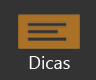
<style>
.page{position:relative;width:96px;height:80px;background:#333333}
.page>*{position:absolute;margin:0}
.t1{font:18px "SegoeUI";color:#fdfafa}
</style>
<div class="page">
<p class="t1" style="left:29px;top:56px;width:41px;height:13px">Dicas</p>
</div>
